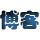
<style>
.page{position:relative;width:40px;height:40px;background:#ffffff}
.page>*{position:absolute;margin:0}
.t1{font:20px "STHupo";letter-spacing:0.005em}
</style>
<div class="page">
<p class="t1" style="left:0px;top:10px;width:39px;height:20px">博客</p>
</div>
